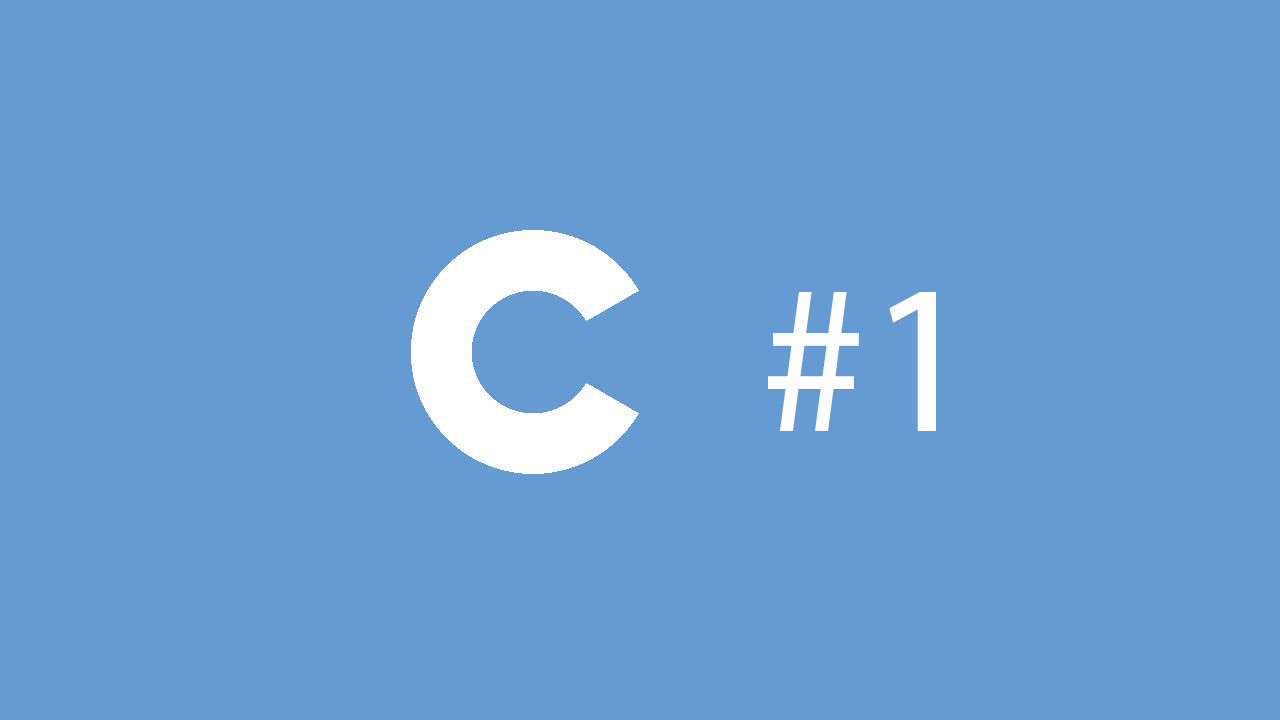
<style>
.page{position:relative;width:1280px;height:720px;background:#669ad3}
.page>*{position:absolute;margin:0}
.t1{font:214px "MyriadPro-Regular";color:#ffffff}
</style>
<div class="page">
<p class="t1" style="left:768px;top:292px;width:168px;height:139px">#1</p>
</div>
